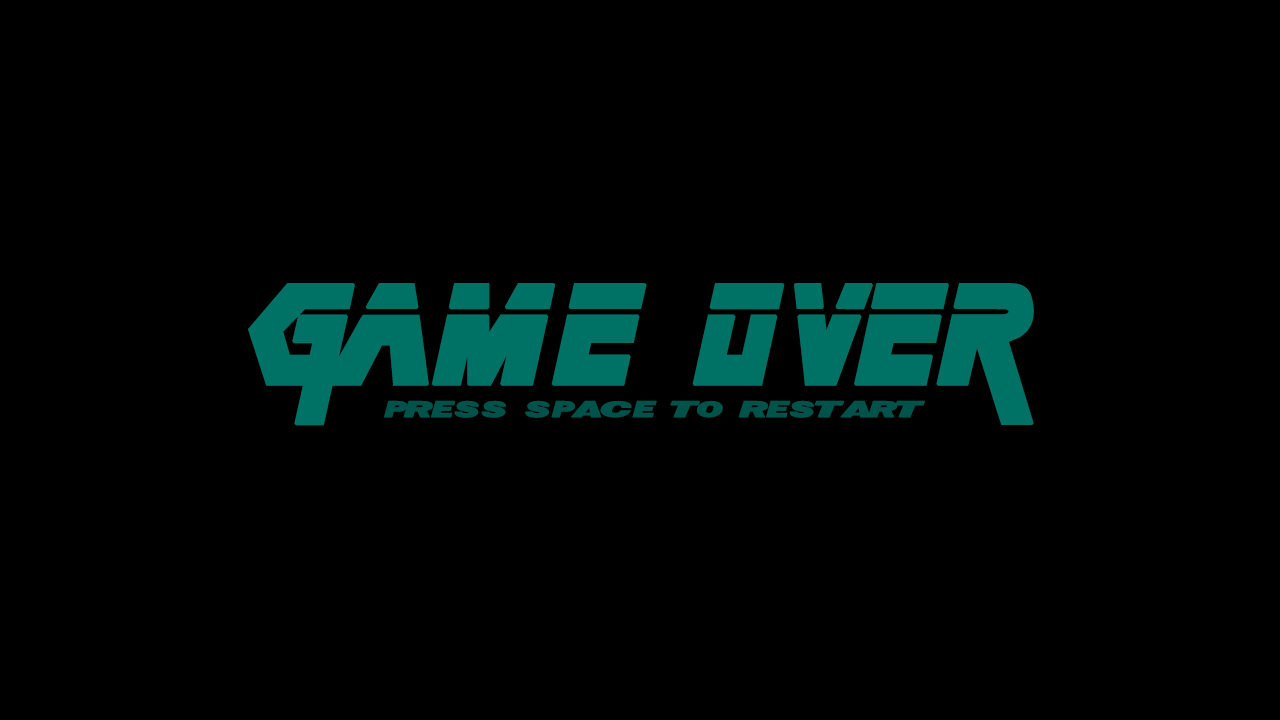
<style>
.page{position:relative;width:1280px;height:720px;background:#000000}
.page>*{position:absolute;margin:0}
.t1{font:110px "MetalGear";letter-spacing:0.025em;color:#007165;font-weight:bold}
.t2{font:30px "Tactical-Espionage-Action";letter-spacing:0.025em;color:#00534a;font-weight:bold}
</style>
<div class="page">
<p class="t1" style="left:248px;top:283px;width:786px;height:143px">Game OveR</p>
<p class="t2" style="left:384px;top:400px;width:541px;height:18px">PRESS SPACE TO RESTART</p>
</div>
